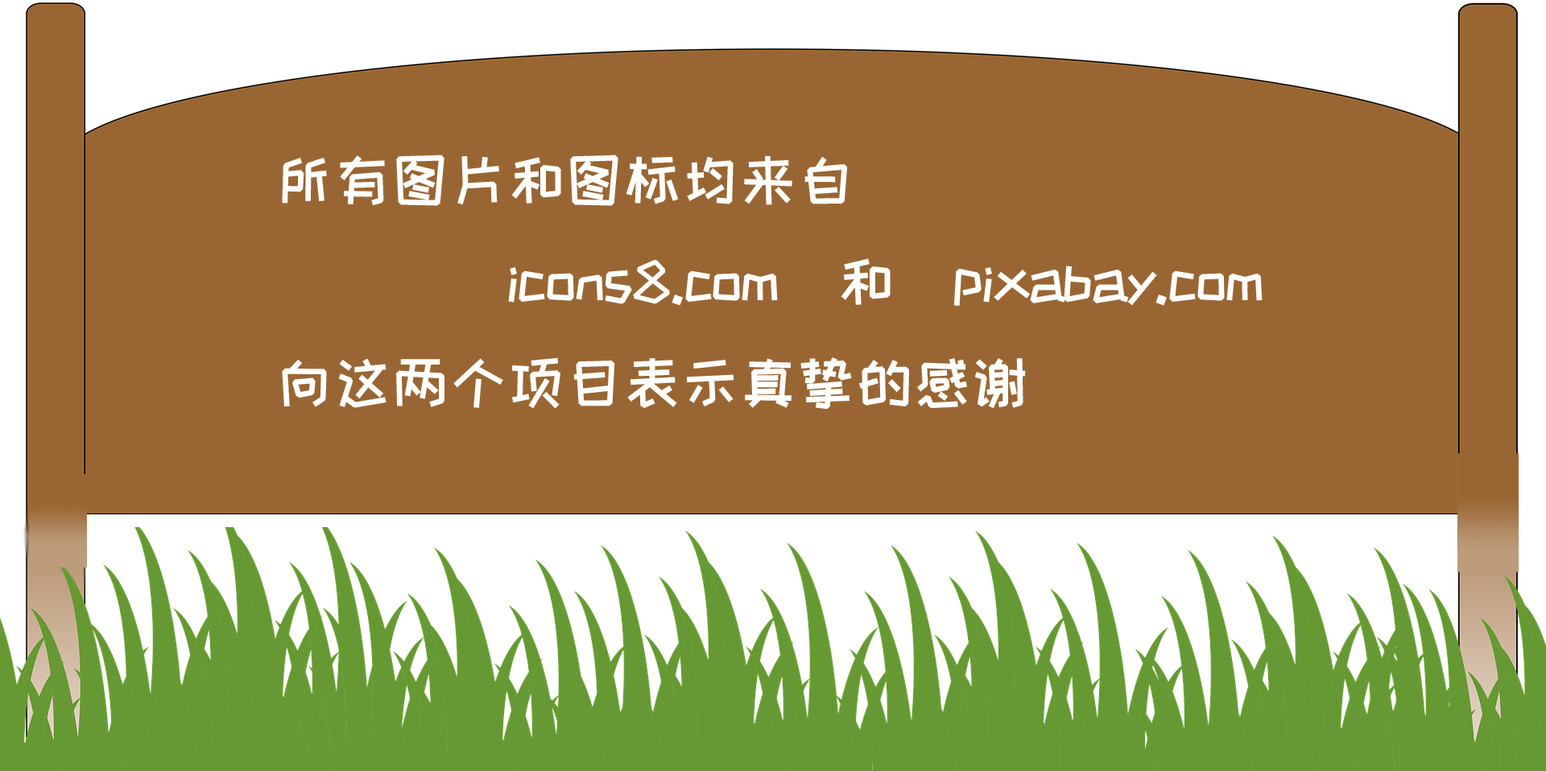
<style>
.page{position:relative;width:1546px;height:771px;background:#996633}
.page>*{position:absolute;margin:0}
.t1{font:58px "HappyZcool-2016";color:#ffffff}
</style>
<div class="page">
<p class="t1" style="left:282px;top:155px;width:980px;height:255px">所有图片和图标均来自<br>        icons8.com  和  pixabay.com<br>向这两个项目表示真挚的感谢</p>
</div>
